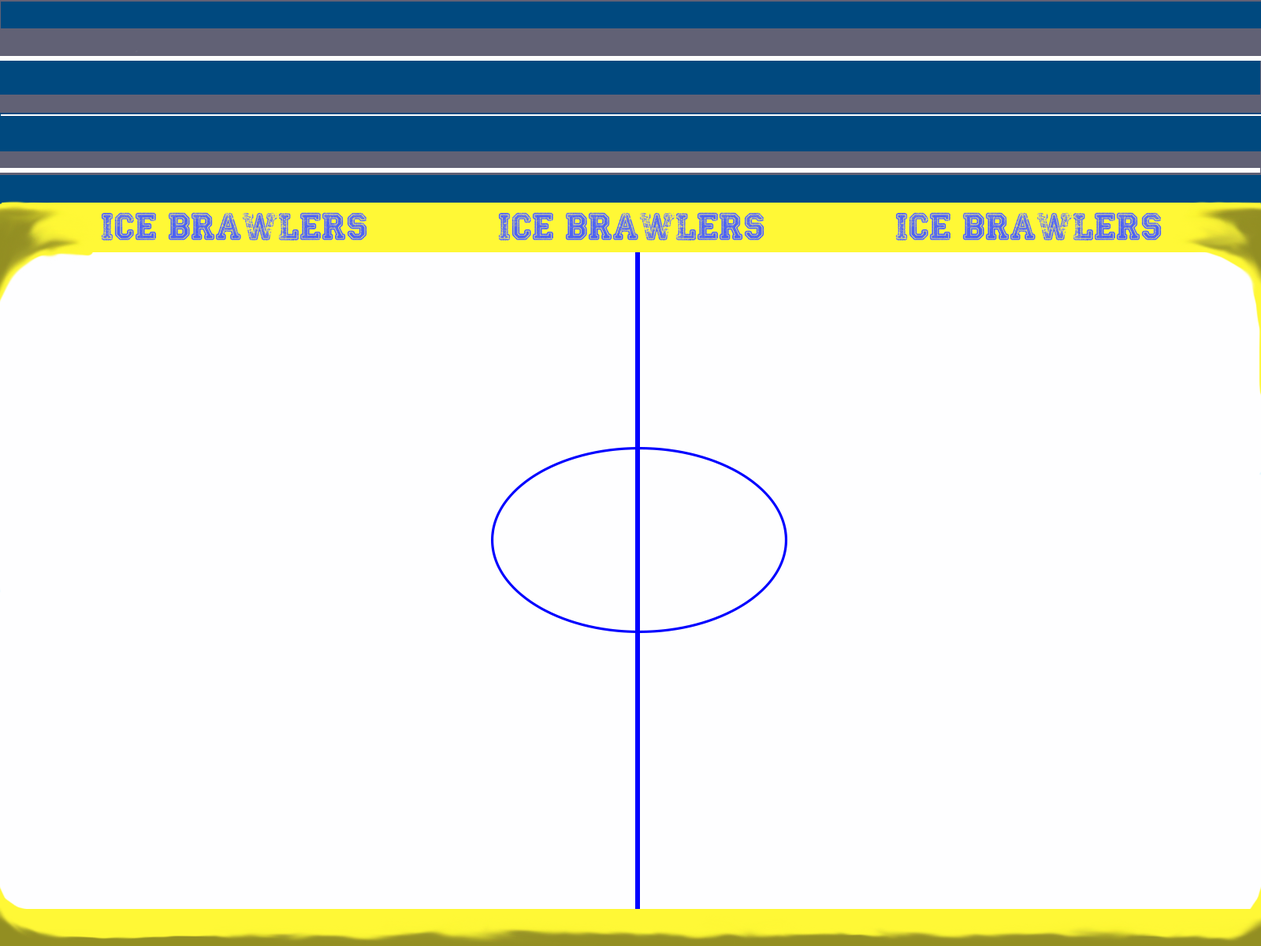
<style>
.page{position:relative;width:1261px;height:946px;background:#fefeff}
.page>*{position:absolute;margin:0}
.t1{font:28.4px "Colleged";color:#4c62f5}
</style>
<div class="page">
<p class="t1" style="left:101px;top:212px;width:1061px;height:28px">ice brawlers      ice brawlers      ice brawlers</p>
</div>
